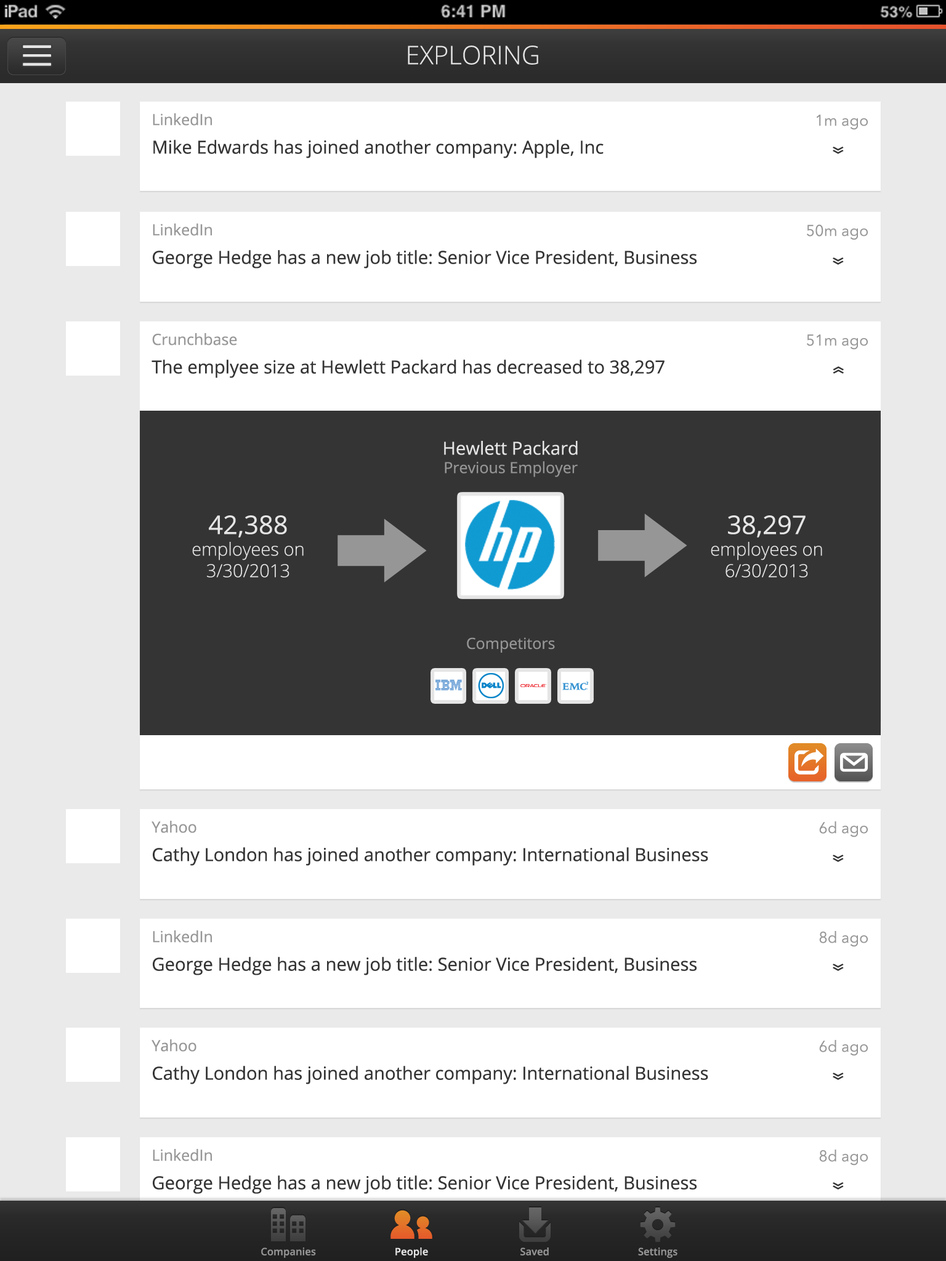
<style>
.page{position:relative;width:946px;height:1261px;background:#ffffff}
.page>*{position:absolute;margin:0}
.t1{font:25.7px "OpenSans-Light";color:#e5e5e5}
.t2{font:18px "OpenSans";color:#343434}
.t3{font:15.4px "OpenSans";color:#969696}
.t4{font:15.4px "AvenirNext-Regular";color:#969696}
.t5{font:25.7px "OpenSans";color:#343434;scale:0.64 1}
.t6{font:18px "OpenSans";color:#e5e5e5}
.t7{font:18px "OpenSans-Light";color:#e5e5e5}
.t8{font:25.7px "OpenSans";color:#e5e5e5}
.t9{font:10.3px "OpenSans-Semibold";color:#969696}
.t10{font:10.3px "OpenSans-Semibold";color:#e5e5e5}
</style>
<div class="page">
<p class="t1" style="left:408px;top:46px;width:130px;height:19px">EXPLORING</p>
<p class="t2" style="left:153px;top:113px;width:450px;height:45px"><span class="t3">LinkedIn<br></span>Mike Edwards has joined another company: Apple, Inc</p>
<p class="t4" style="left:816px;top:115px;width:51px;height:15px">1m ago</p>
<p class="t5" style="left:832px;top:147px;width:11px;height:7px;rotate:90deg">»</p>
<p class="t2" style="left:153px;top:223px;width:543px;height:45px"><span class="t3">LinkedIn<br></span>George Hedge has a new job title: Senior Vice President, Business Development</p>
<p class="t4" style="left:807px;top:224px;width:60px;height:16px">50m ago</p>
<p class="t5" style="left:832px;top:257px;width:11px;height:8px;rotate:90deg">»</p>
<p class="t2" style="left:151px;top:333px;width:513px;height:45px"><span class="t3">Crunchbase<br></span>The emplyee size at Hewlett Packard has decreased to 38,297</p>
<p class="t4" style="left:807px;top:334px;width:60px;height:16px">51m ago</p>
<p class="t5" style="left:832px;top:366px;width:11px;height:8px;rotate:-90deg">»</p>
<p class="t3" style="left:444px;top:441px;width:134px;height:36px;text-align:center"><span class="t6">Hewlett Packard<br></span>Previous Employer</p>
<p class="t7" style="left:192px;top:515px;width:112px;height:63px;text-align:center"><span class="t8">42,388<br></span>employees on <br>3/30/2013</p>
<p class="t7" style="left:710px;top:515px;width:112px;height:63px;text-align:center"><span class="t8">38,297<br></span>employees on <br>6/30/2013</p>
<p class="t3" style="left:467px;top:637px;width:88px;height:16px">Competitors</p>
<p class="t2" style="left:151px;top:821px;width:557px;height:45px"><span class="t3">Yahoo<br></span>Cathy London has joined another company: International Business Machines</p>
<p class="t4" style="left:819px;top:821px;width:48px;height:16px">6d ago</p>
<p class="t5" style="left:832px;top:855px;width:11px;height:7px;rotate:90deg">»</p>
<p class="t2" style="left:153px;top:930px;width:543px;height:45px"><span class="t3">LinkedIn<br></span>George Hedge has a new job title: Senior Vice President, Business</p>
<p class="t4" style="left:819px;top:931px;width:48px;height:16px">8d ago</p>
<p class="t5" style="left:832px;top:964px;width:11px;height:7px;rotate:90deg">»</p>
<p class="t2" style="left:151px;top:1039px;width:557px;height:45px"><span class="t3">Yahoo<br></span>Cathy London has joined another company: International Business Machines</p>
<p class="t4" style="left:819px;top:1040px;width:48px;height:16px">6d ago</p>
<p class="t5" style="left:832px;top:1073px;width:11px;height:7px;rotate:90deg">»</p>
<p class="t2" style="left:153px;top:1149px;width:543px;height:45px"><span class="t3">LinkedIn<br></span>George Hedge has a new job title: Senior Vice President, Business</p>
<p class="t4" style="left:819px;top:1149px;width:48px;height:16px">8d ago</p>
<p class="t5" style="left:832px;top:1182px;width:11px;height:7px;rotate:90deg">»</p>
<p class="t9" style="left:261px;top:1247px;width:55px;height:11px">Companies</p>
<p class="t10" style="left:395px;top:1247px;width:33px;height:11px">People</p>
<p class="t9" style="left:520px;top:1247px;width:29px;height:8px">Saved</p>
<p class="t9" style="left:638px;top:1247px;width:39px;height:11px">Settings</p>
</div>
